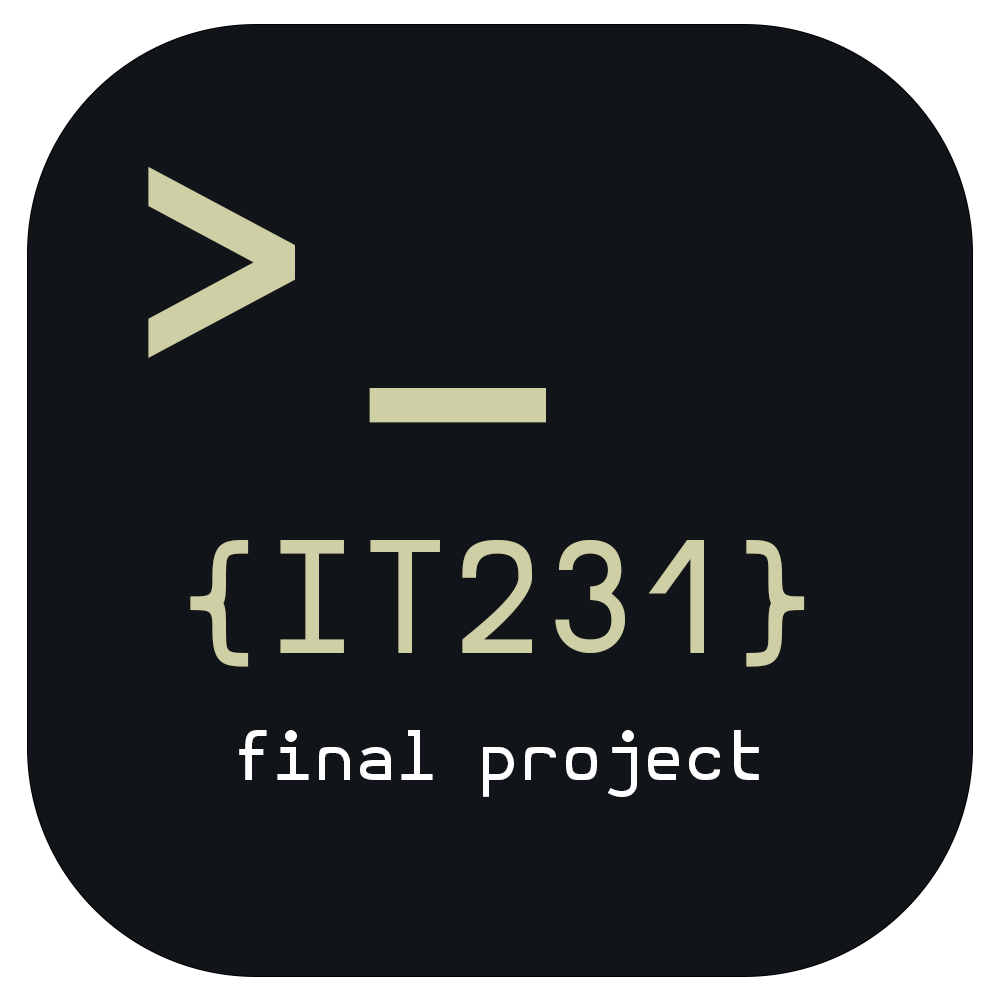
<style>
.page{position:relative;width:1000px;height:1000px;background:#111519}
.page>*{position:absolute;margin:0}
.t1{font:381.6px "HurmitNF-Regular";color:#cecfa4}
.t2{font:150px "HurmitNF-Regular";color:#cecfa4}
.t3{font:66.7px "HurmitNF-Regular";color:#fefefe}
</style>
<div class="page">
<p class="t1" style="left:148px;top:167px;width:398px;height:256px">&gt;_</p>
<p class="t2" style="left:190px;top:540px;width:615px;height:127px">{IT231}</p>
<p class="t3" style="left:239px;top:730px;width:520px;height:67px">final project</p>
</div>
